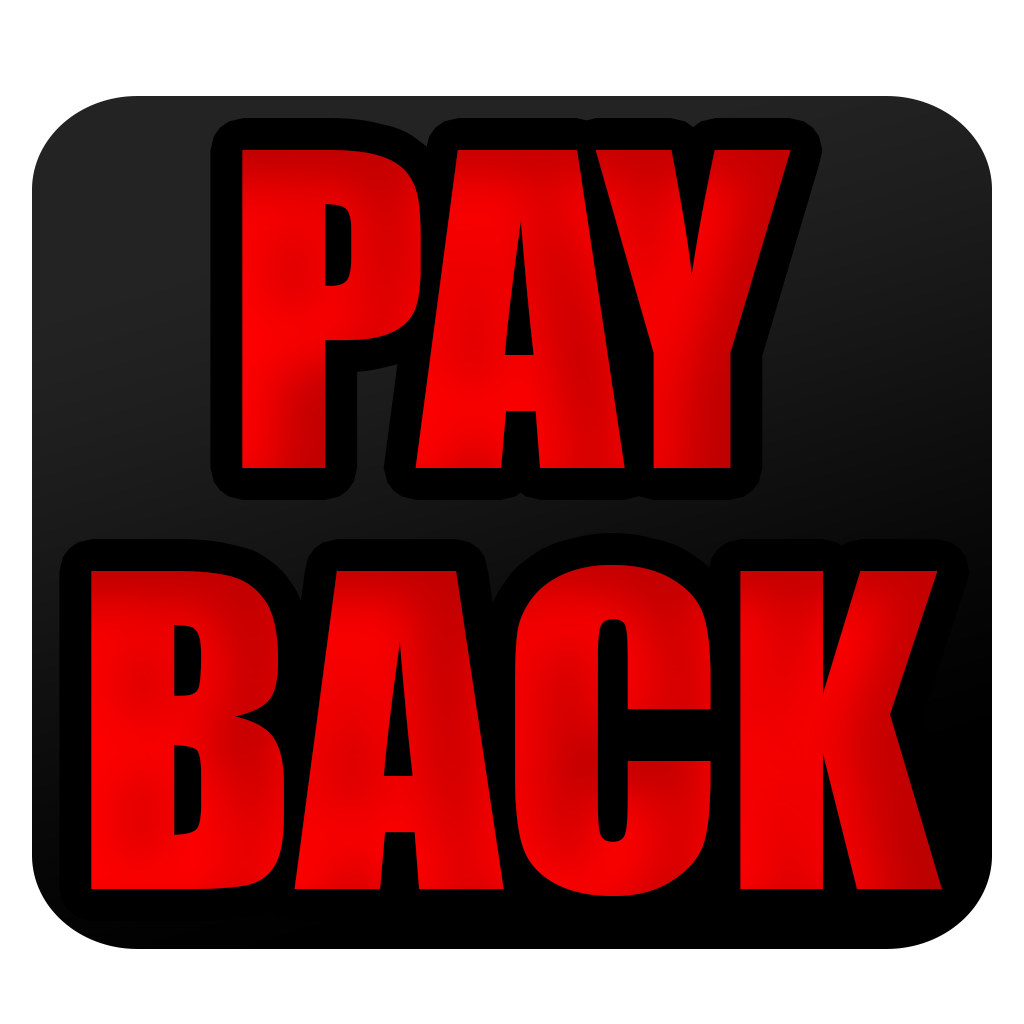
<style>
.page{position:relative;width:1024px;height:1024px;background:#000000}
.page>*{position:absolute;margin:0}
.t1{font:402.1px/421.4px "Impact";color:#e60000}
</style>
<div class="page">
<p class="t1" style="left:91px;top:150px;width:851px;height:746px;text-align:center">PAY<br>BACK</p>
</div>
